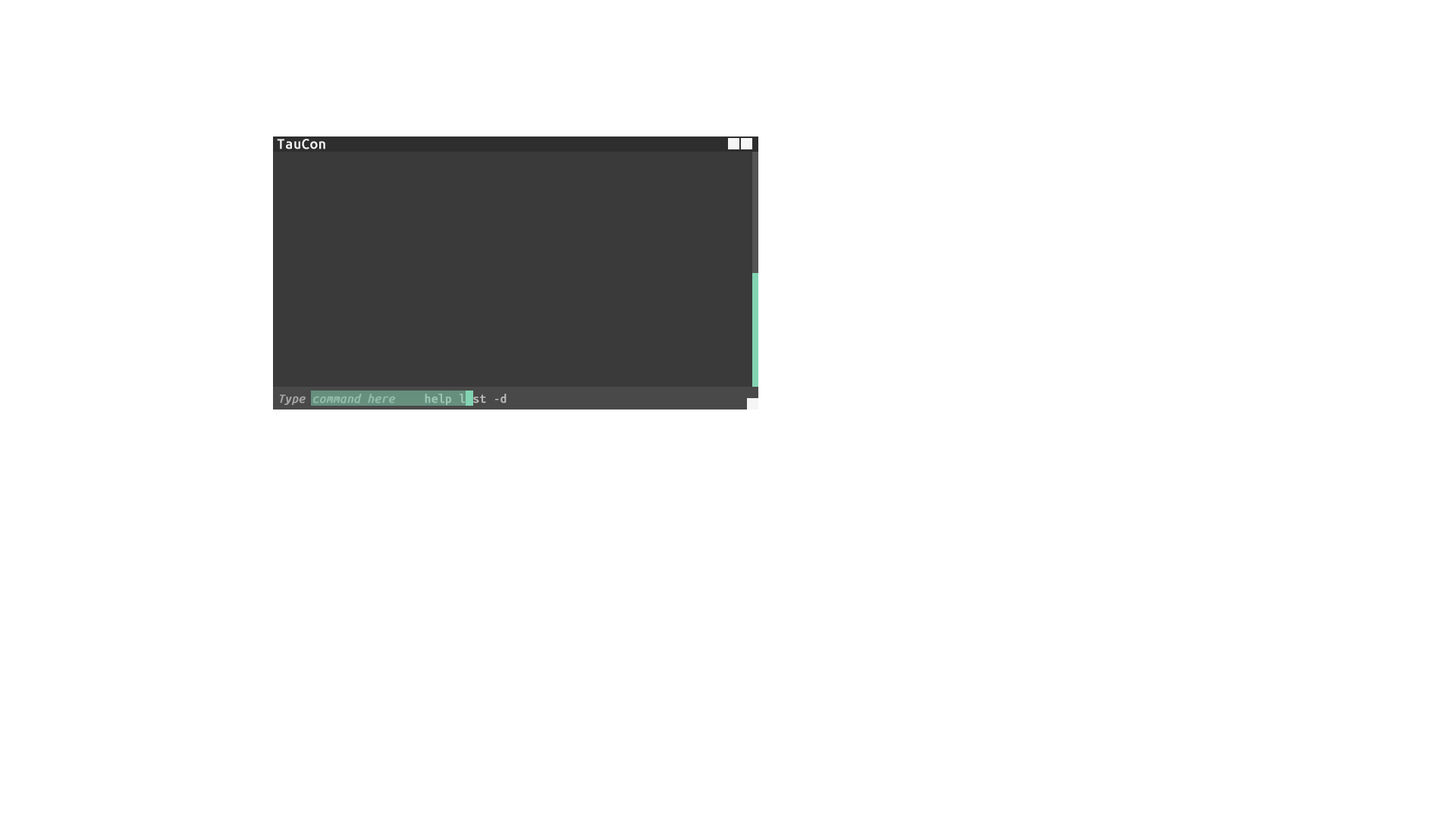
<style>
.page{position:relative;width:1456px;height:819px;background:#ffffff}
.page>*{position:absolute;margin:0}
.t1{font:15.4px "UbuntuMono-Regular";letter-spacing:0.01em;color:#f5f5f5;font-weight:bold}
.t2{font:12.8px "UbuntuMono-Italic";letter-spacing:0.01em;color:#a4a4a4;font-weight:bold}
.t3{font:12.8px "UbuntuMono-Regular";letter-spacing:0.01em;font-weight:bold}
</style>
<div class="page">
<p class="t1" style="left:277px;top:139px;width:48px;height:10px">TauCon</p>
<p class="t2" style="left:280px;top:394px;width:115px;height:11px">Type command here</p>
<p class="t3" style="left:425px;top:394px;width:82px;height:11px">help list -d</p>
</div>
